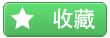
<style>
.page{position:relative;width:110px;height:38px;background:#ffffff}
.page>*{position:absolute;margin:0}
.t1{font:22px "AdobeHeitiStd-Regular";color:#ffffff}
</style>
<div class="page">
<p class="t1" style="left:53px;top:8px;width:42px;height:22px">收藏</p>
</div>
